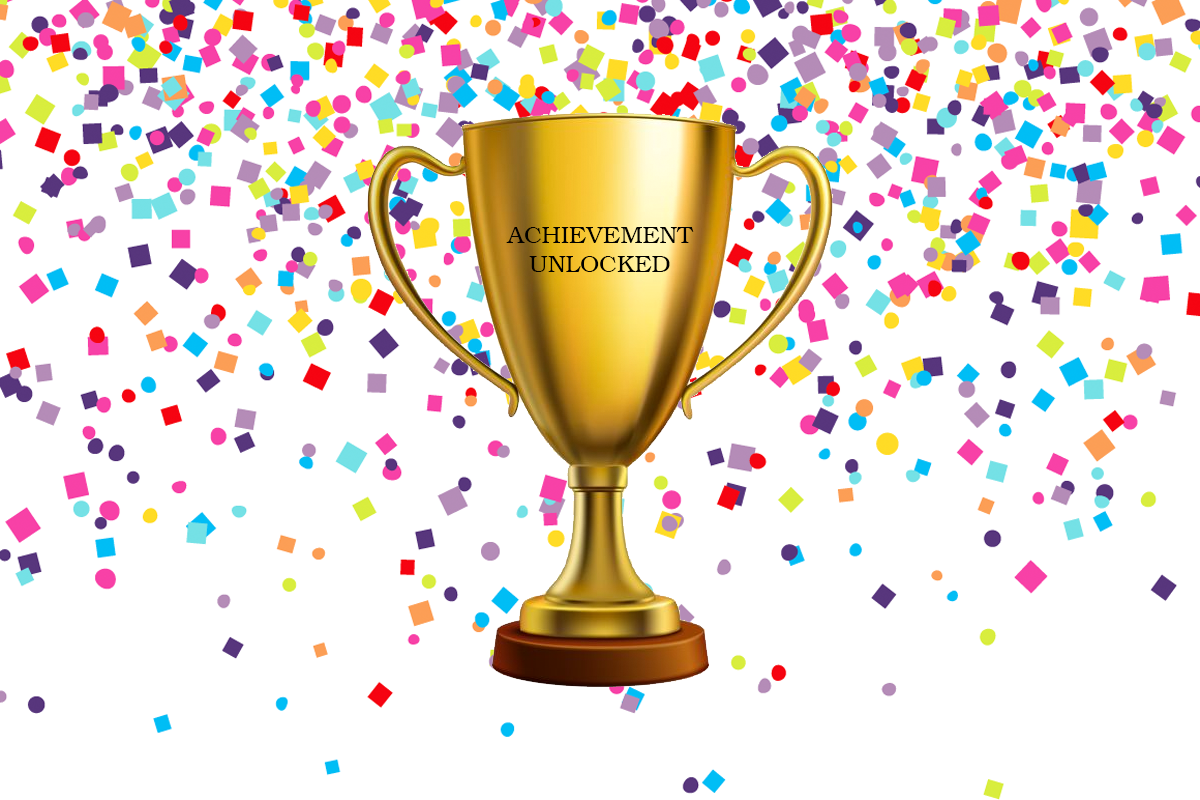
<style>
.page{position:relative;width:1200px;height:800px;background:#ffffff}
.page>*{position:absolute;margin:0}
.t1{font:24px "Bookman-Light";color:#000000}
</style>
<div class="page">
<p class="t1" style="left:506px;top:227px;width:188px;height:45px;text-align:center">ACHIEVEMENT<br>UNLOCKED</p>
</div>
